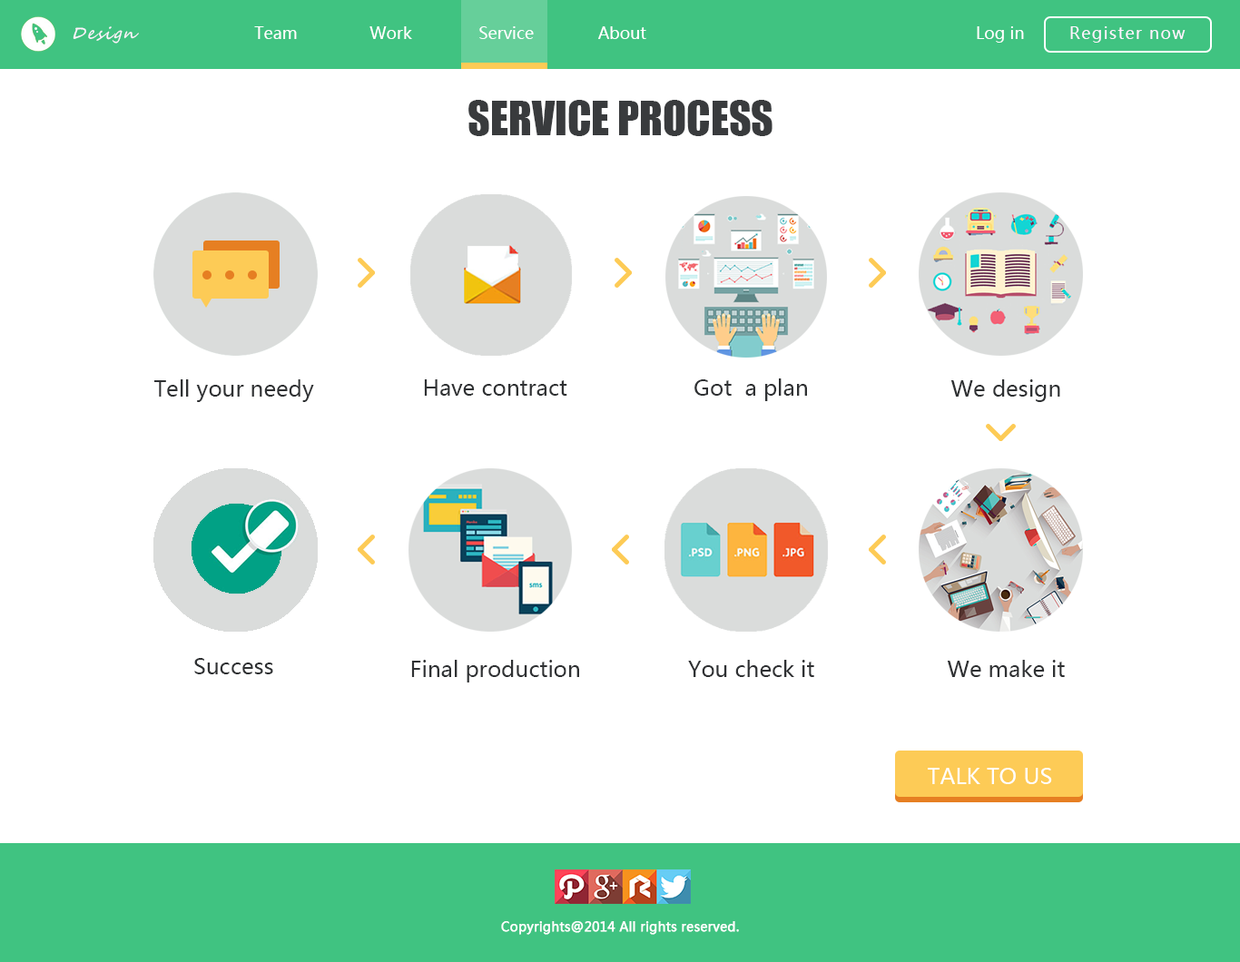
<style>
.page{position:relative;width:1240px;height:962px;background:#ffffff}
.page>*{position:absolute;margin:0}
.t1{font:16.3px "SegoeScript";letter-spacing:0.075em;color:#fff4ff;font-style:italic}
.t2{font:16.3px "MicrosoftYaHei";color:#ffffff}
.t3{font:16.3px "MicrosoftYaHei";letter-spacing:0.075em;color:#fff4ff}
.t4{font:43.6px "Impact";color:#393b3d}
.t5{font:21.8px "MicrosoftYaHei";color:#2f3133}
.t6{font:21.8px "MicrosoftYaHei";color:#ffffff}
.t7{font:12.7px "MicrosoftYaHei";color:#ffffff;font-weight:bold}
</style>
<div class="page">
<p class="t1" style="left:73px;top:26px;width:66px;height:18px">Design</p>
<p class="t2" style="left:254px;top:26px;width:43px;height:13px">Team</p>
<p class="t2" style="left:369px;top:26px;width:43px;height:13px">Work</p>
<p class="t2" style="left:479px;top:26px;width:55px;height:13px">Service</p>
<p class="t2" style="left:598px;top:26px;width:48px;height:13px">About</p>
<p class="t2" style="left:976px;top:26px;width:48px;height:17px">Log in</p>
<p class="t3" style="left:1070px;top:26px;width:115px;height:17px">Register now</p>
<p class="t4" style="left:468px;top:100px;width:304px;height:36px">SERVICE PROCESS</p>
<p class="t5" style="left:154px;top:379px;width:160px;height:23px">Tell your needy</p>
<p class="t5" style="left:424px;top:379px;width:143px;height:17px">Have contract</p>
<p class="t5" style="left:694px;top:378px;width:113px;height:23px">Got  a plan</p>
<p class="t5" style="left:950px;top:379px;width:110px;height:23px">We design</p>
<p class="t5" style="left:194px;top:658px;width:79px;height:16px">Success</p>
<p class="t5" style="left:411px;top:660px;width:168px;height:22px">Final production</p>
<p class="t5" style="left:688px;top:660px;width:126px;height:17px">You check it</p>
<p class="t5" style="left:947px;top:660px;width:117px;height:17px">We make it</p>
<p class="t6" style="left:927px;top:768px;width:125px;height:16px">TALK TO US</p>
<p class="t7" style="left:501px;top:921px;width:238px;height:14px">Copyrights@2014 All rights reserved.</p>
</div>
